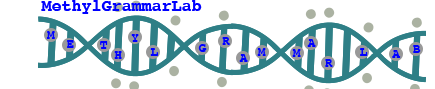
<style>
.page{position:relative;width:435px;height:89px;background:#ffffff}
.page>*{position:absolute;margin:0}
.t1{font:16.7px "Courier-Bold";color:#0000ff}
.t2{font:12.5px "Courier-Bold";color:#0000ff}
</style>
<div class="page">
<p class="t1" style="left:41px;top:0px;width:161px;height:14px">MethylGrammarLab</p>
<p class="t2" style="left:46px;top:31px;width:9px;height:8px">M</p>
<p class="t2" style="left:66px;top:40px;width:8px;height:8px">E</p>
<p class="t2" style="left:100px;top:41px;width:8px;height:8px">T</p>
<p class="t2" style="left:131px;top:34px;width:8px;height:8px">Y</p>
<p class="t2" style="left:222px;top:37px;width:8px;height:8px">R</p>
<p class="t2" style="left:307px;top:39px;width:9px;height:8px">A</p>
<p class="t2" style="left:114px;top:51px;width:8px;height:8px">H</p>
<p class="t2" style="left:150px;top:48px;width:9px;height:8px">L</p>
<p class="t2" style="left:198px;top:44px;width:9px;height:8px">G</p>
<p class="t2" style="left:239px;top:54px;width:9px;height:8px">A</p>
<p class="t2" style="left:257px;top:48px;width:9px;height:8px">M</p>
<p class="t2" style="left:292px;top:49px;width:9px;height:8px">M</p>
<p class="t2" style="left:360px;top:48px;width:8px;height:8px">L</p>
<p class="t2" style="left:392px;top:50px;width:9px;height:8px">A</p>
<p class="t2" style="left:413px;top:45px;width:8px;height:8px">B</p>
<p class="t2" style="left:325px;top:59px;width:8px;height:8px">R</p>
</div>
